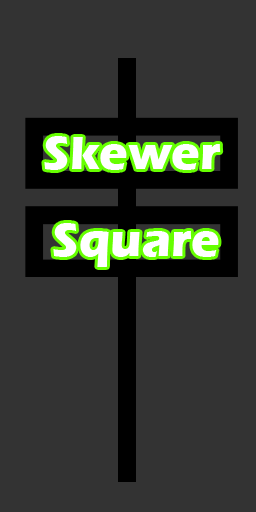
<style>
.page{position:relative;width:256px;height:512px;background:#333333}
.page>*{position:absolute;margin:0}
.t1{font:48px "ErasITC-Bold";color:#ffffff}
</style>
<div class="page">
<p class="t1" style="left:44px;top:136px;width:177px;height:34px">Skewer</p>
<p class="t1" style="left:53px;top:223px;width:166px;height:44px">Square</p>
</div>
